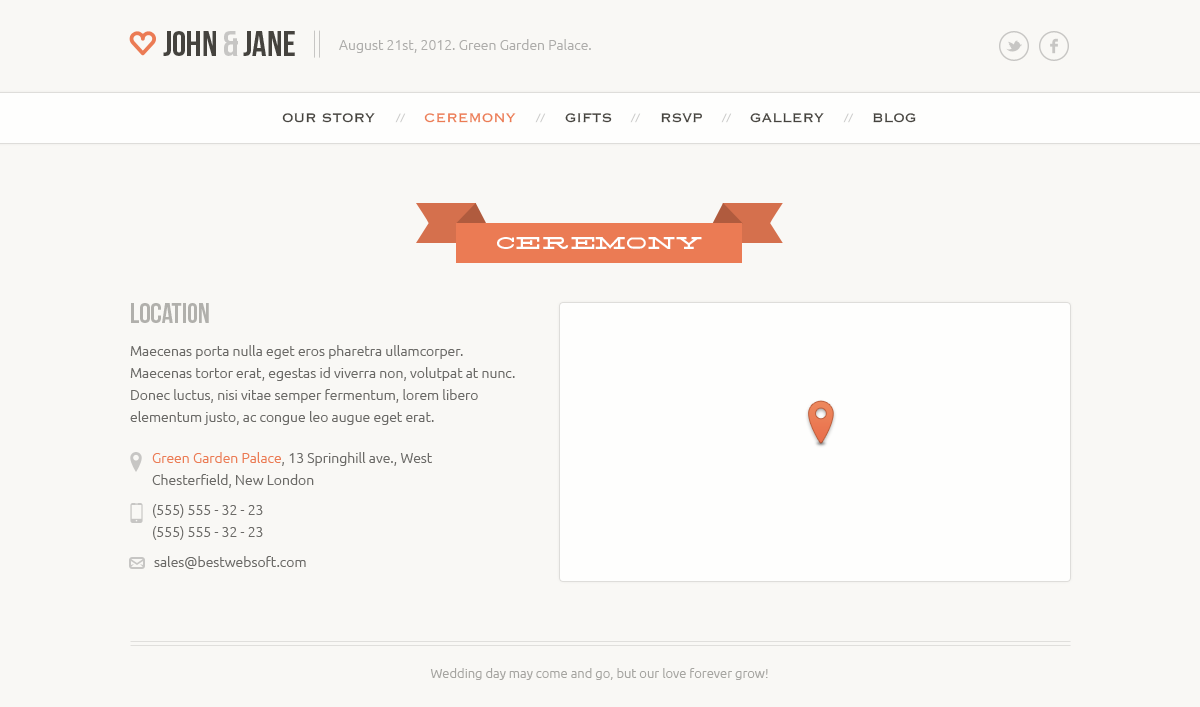
<style>
.page{position:relative;width:1200px;height:707px;background:#f9f8f5}
.page>*{position:absolute;margin:0}
.t1{font:36px "BebasNeue";color:#45433e;text-transform:uppercase}
.t2{font:36px "BebasNeue";color:#c7c6c4;text-transform:uppercase}
.t3{font:14px "Ubuntu-Light";color:#aeadab}
.t4{font:16px "Copperplate-Light";color:#45433e;text-transform:uppercase}
.t5{font:16px "Copperplate-Light";color:#eb7b54;text-transform:uppercase}
.t6{font:24px "Silverfake";color:#ffffff;text-transform:uppercase}
.t7{font:28px "BebasNeue";color:#b1b0ac;text-transform:uppercase}
.t8{font:14px/22px "Ubuntu-Light";color:#6b6a67}
.t9{font:14px/22px "Ubuntu-Light";color:#eb7b54}
.t10{font:14px "Ubuntu-Light";color:#6b6a67}
.t11{font:13px "Ubuntu-Light";color:#a6a5a1}
</style>
<div class="page">
<p class="t1" style="left:163px;top:31px;width:132px;height:25px">John <span class="t2">&amp;</span> Jane</p>
<p class="t3" style="left:339px;top:39px;width:252px;height:14px">August 21st, 2012. Green Garden Palace.</p>
<p class="t4" style="left:282px;top:113px;width:93px;height:10px">Our story</p>
<p class="t5" style="left:424px;top:113px;width:92px;height:10px">Ceremony</p>
<p class="t4" style="left:565px;top:113px;width:47px;height:10px">Gifts</p>
<p class="t4" style="left:661px;top:113px;width:41px;height:10px">RSVP</p>
<p class="t4" style="left:750px;top:113px;width:74px;height:10px">Gallery</p>
<p class="t4" style="left:873px;top:113px;width:43px;height:10px">Blog</p>
<p class="t6" style="left:497px;top:237px;width:205px;height:12px">Ceremony</p>
<p class="t7" style="left:131px;top:303px;width:78px;height:20px">Location</p>
<p class="t8" style="left:130px;top:345px;width:385px;height:80px">Maecenas porta nulla eget eros pharetra ullamcorper. Maecenas tortor erat, egestas id viverra non, volutpat at nunc. Donec luctus, nisi vitae semper fermentum, lorem libero elementum justo, ac congue leo augue eget erat.</p>
<p class="t8" style="left:152px;top:452px;width:280px;height:36px"><span class="t9">Green Garden Palace</span>, 13 Springhill ave., West Chesterfield, New London</p>
<p class="t8" style="left:153px;top:504px;width:110px;height:36px">(555) 555 - 32 - 23<br>(555) 555 - 32 - 23</p>
<p class="t10" style="left:154px;top:556px;width:152px;height:13px">sales@bestwebsoft.com</p>
<p class="t11" style="left:430px;top:668px;width:338px;height:12px">Wedding day may come and go, but our love forever grow!</p>
</div>
